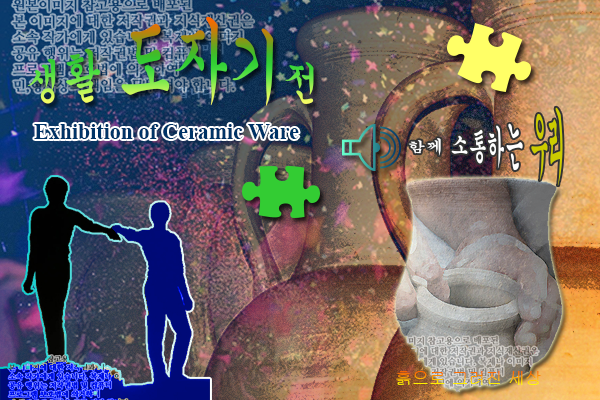
<style>
.page{position:relative;width:600px;height:400px}
.page>*{position:absolute;margin:0}
.t1{font:55.1px "Gungsuh"}
.t2{font:38.1px "Gungsuh"}
.t3{font:18px "Gungsuh";color:#ffffff}
.t4{font:18px "Gungsuh";color:#cccc00}
.t5{font:21.6px "TimesNewRomanPS-BoldMT";color:#003366}
.t6{font:16.9px "Gulim"}
</style>
<div class="page">
<p class="t1" style="left:27px;top:16px;width:287px;height:90px"><span class="t2">생활 </span>도자기<span class="t2">전</span></p>
<p class="t3" style="left:408px;top:107px;width:155px;height:79px">함께 소통하는 <span class="t4">우리</span></p>
<p class="t5" style="left:34px;top:124px;width:265px;height:15px">Exhibition of Ceramic Ware</p>
<p class="t6" style="left:396px;top:371px;width:145px;height:14px">흙으로 그려진 세상</p>
</div>
